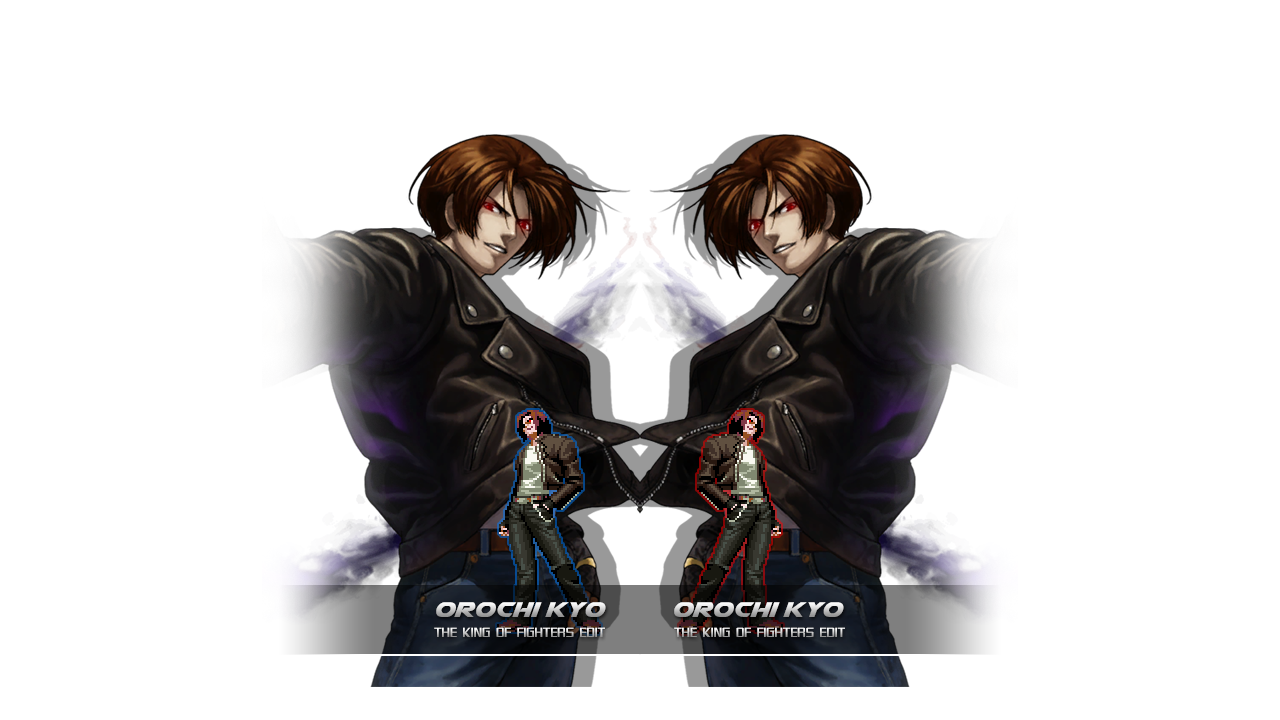
<style>
.page{position:relative;width:1280px;height:720px;background:#ffffff}
.page>*{position:absolute;margin:0}
.t1{font:28px "Airstrike"}
.t2{font:14px "SFTheraminGothic";text-transform:uppercase}
</style>
<div class="page">
<p class="t1" style="left:436px;top:602px;width:170px;height:15px">orochi kyo</p>
<p class="t1" style="left:674px;top:602px;width:170px;height:15px">orochi kyo</p>
<p class="t2" style="left:434px;top:627px;width:171px;height:10px">The King of Fighters EDIT</p>
<p class="t2" style="left:674px;top:627px;width:171px;height:10px">The King of Fighters EDIT</p>
</div>
